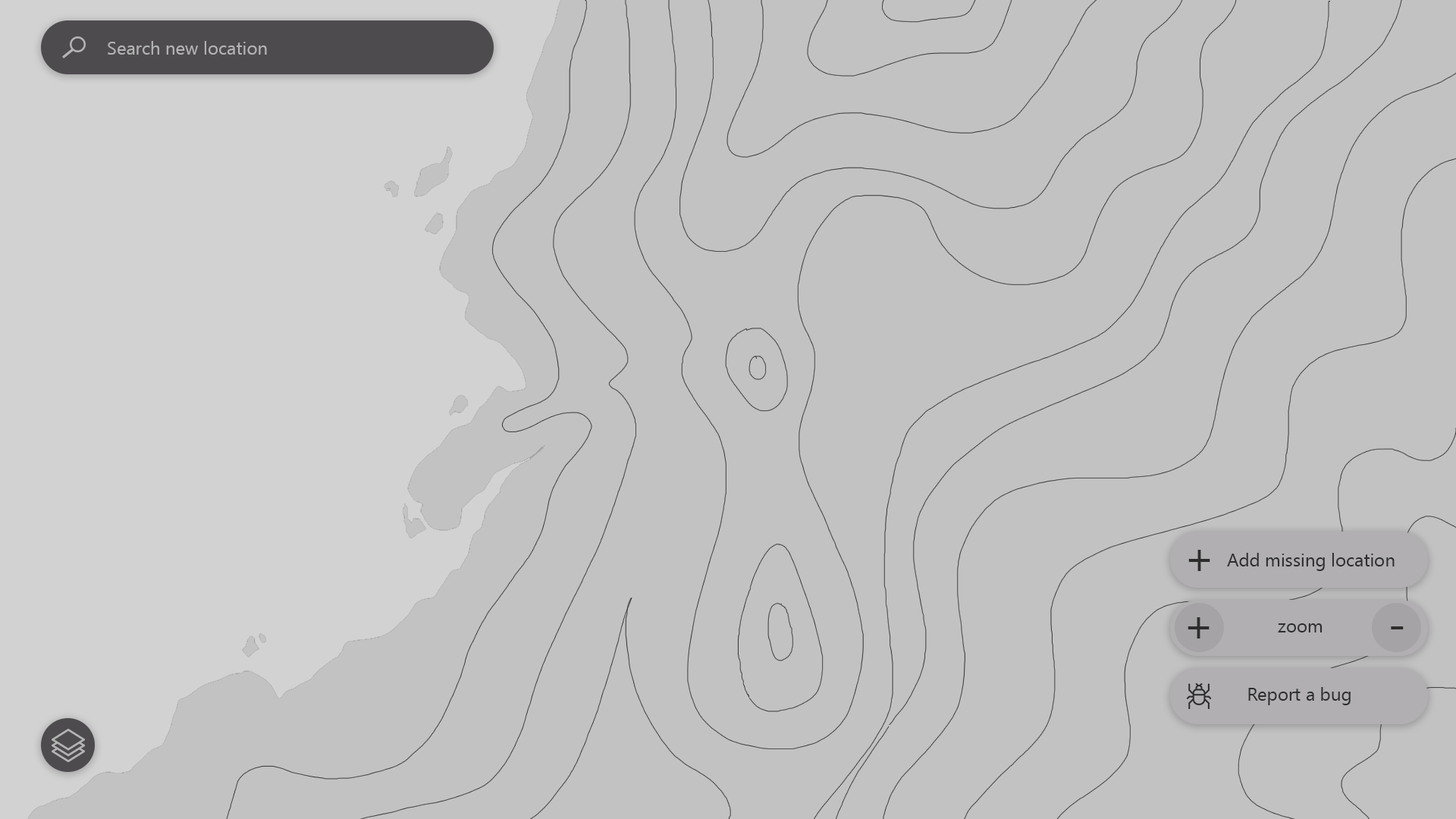
<style>
.page{position:relative;width:1456px;height:819px;background:#c2c2c2}
.page>*{position:absolute;margin:0}
.t1{font:18.2px "SegoeUI";color:#b4b4b4}
.t2{font:45.5px "SegoeUI";color:#2e2d2e}
.t3{font:18.2px "SegoeUI";color:#2e2d2e}
</style>
<div class="page">
<p class="t1" style="left:108px;top:41px;width:159px;height:14px">Search new location</p>
<p class="t2" style="left:1188px;top:550px;width:22px;height:21px">+</p>
<p class="t3" style="left:1227px;top:553px;width:168px;height:18px">Add missing location</p>
<p class="t2" style="left:1188px;top:617px;width:22px;height:22px">+</p>
<p class="t3" style="left:1278px;top:623px;width:45px;height:9px">zoom</p>
<p class="t2" style="left:1391px;top:626px;width:13px;height:3px">-</p>
<p class="t3" style="left:1248px;top:687px;width:103px;height:18px">Report a bug</p>
</div>
